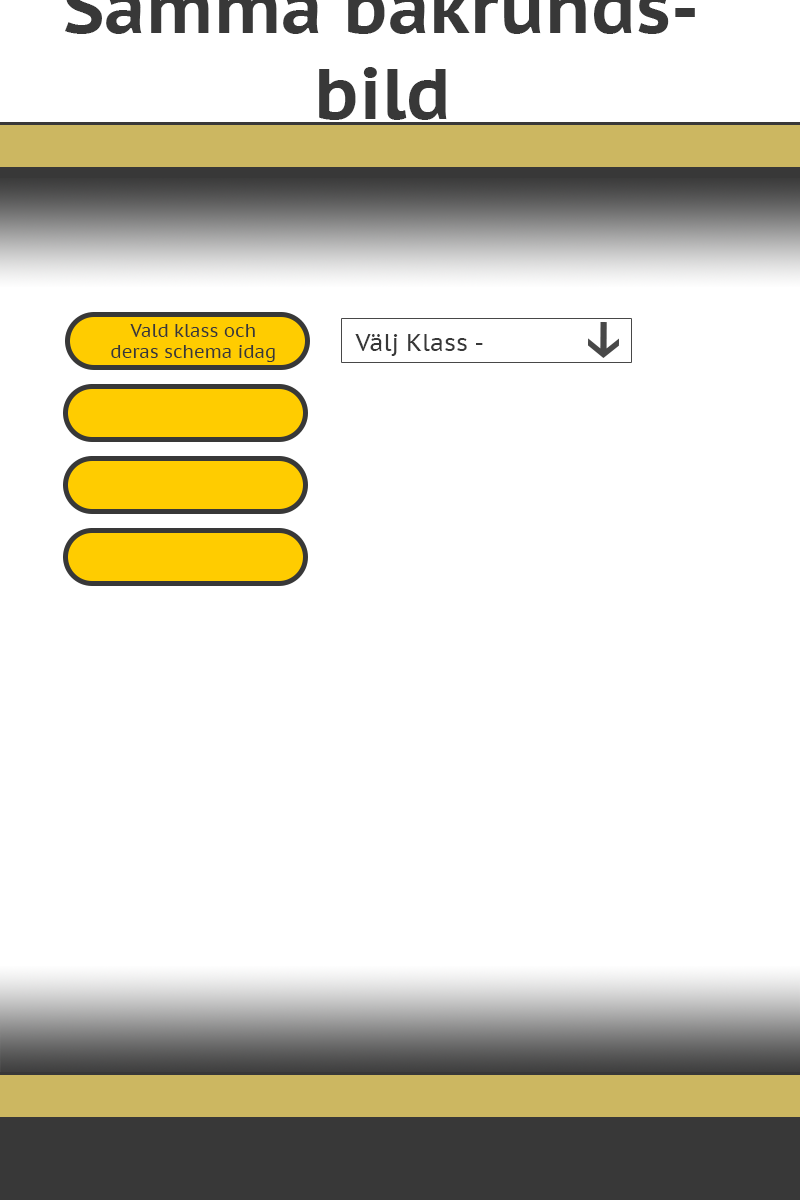
<style>
.page{position:relative;width:800px;height:1200px;background:#ffffff}
.page>*{position:absolute;margin:0}
.t1{font:18px "PTSans-Caption";color:#383838}
.t2{font:24px "PTSans-Caption";color:#383838}
</style>
<div class="page">
<p class="t1" style="left:111px;top:324px;width:164px;height:38px;text-align:center">Vald klass och <br>deras schema idag</p>
<p class="t2" style="left:355px;top:334px;width:128px;height:22px">Välj Klass -</p>
</div>
